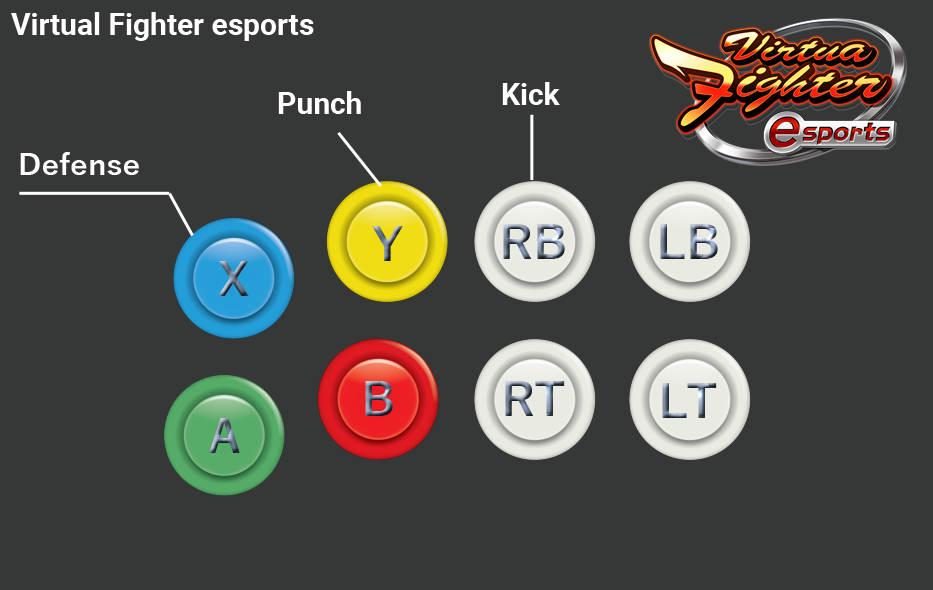
<style>
.page{position:relative;width:933px;height:590px;background:#363838}
.page>*{position:absolute;margin:0}
.t1{font:30px "Roboto-Bold";color:#ffffff}
.t2{font:30px "YuGothic-Bold";color:#ffffff}
</style>
<div class="page">
<p class="t1" style="left:11px;top:12px;width:303px;height:29px">Virtual Fighter esports</p>
<p class="t1" style="left:502px;top:82px;width:58px;height:23px">Kick</p>
<p class="t1" style="left:278px;top:91px;width:83px;height:23px">Punch</p>
<p class="t2" style="left:20px;top:152px;width:119px;height:23px">Defense</p>
</div>
